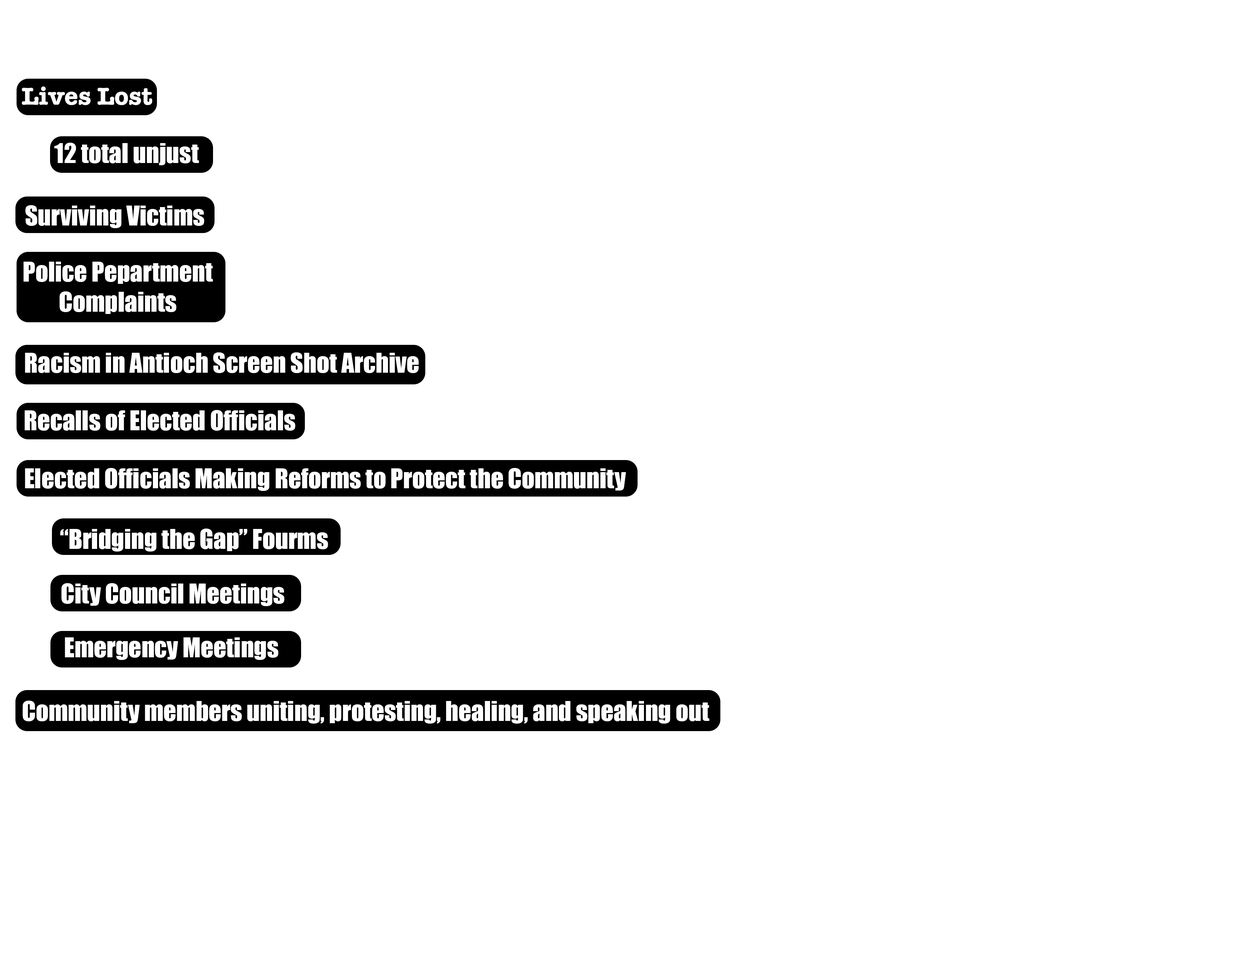
<style>
.page{position:relative;width:1242px;height:960px;background:#ffffff}
.page>*{position:absolute;margin:0}
.t1{font:25.1px "AmericanTypewriter-Bold";color:#ffffff}
.t2{font:25.1px "Impact";color:#ffffff}
.t3{font:25.1px "Impact";color:#fffefe}
</style>
<div class="page">
<p class="t1" style="left:22px;top:86px;width:130px;height:19px">Lives Lost</p>
<p class="t2" style="left:54px;top:143px;width:145px;height:22px">12 total unjust</p>
<p class="t2" style="left:25px;top:205px;width:179px;height:23px">Surviving Victims</p>
<p class="t2" style="left:23px;top:262px;width:190px;height:52px;text-align:center">Police Pepartment<br>Complaints</p>
<p class="t2" style="left:25px;top:352px;width:394px;height:21px">Racism in Antioch Screen Shot Archive</p>
<p class="t3" style="left:24px;top:410px;width:272px;height:21px">Recalls of Elected Officials</p>
<p class="t2" style="left:25px;top:468px;width:601px;height:23px">Elected Officials Making Reforms to Protect the Community</p>
<p class="t2" style="left:60px;top:529px;width:268px;height:22px">“Bridging the Gap” Fourms</p>
<p class="t2" style="left:61px;top:583px;width:224px;height:23px">City Council Meetings</p>
<p class="t2" style="left:65px;top:637px;width:214px;height:23px">Emergency Meetings</p>
<p class="t2" style="left:23px;top:701px;width:687px;height:23px">Community members uniting, protesting, healing, and speaking out</p>
</div>
